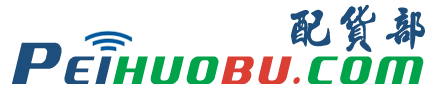
<style>
.page{position:relative;width:438px;height:89px;background:#ffffff}
.page>*{position:absolute;margin:0}
.t1{font:48px "ª÷±ö®ü³ø®Ñªk¦r§Î";letter-spacing:0.1em;color:#1e4e7b;scale:0.9 1}
.t2{font:48px "SFQuartzite-Oblique";letter-spacing:0.1em;color:#00a34a;scale:0.9 1}
.t3{font:72px "SFQuartzite-Oblique";letter-spacing:0.1em;color:#1e4e7b;scale:0.9 1}
.t4{font:48px "SFQuartzite-Oblique";letter-spacing:0.1em;color:#1e4e7b;scale:0.9 1}
.t5{font:48px "SFQuartzite-Oblique";letter-spacing:0.1em;color:#db3f33;scale:0.9 1}
</style>
<div class="page">
<p class="t1" style="left:290px;top:4px;width:135px;height:48px">配貨部</p>
<p class="t2" style="left:12px;top:42px;width:412px;height:42px"><span class="t3">P</span><span class="t4">EI</span>HUO<span class="t5">BU.</span>COM</p>
</div>
